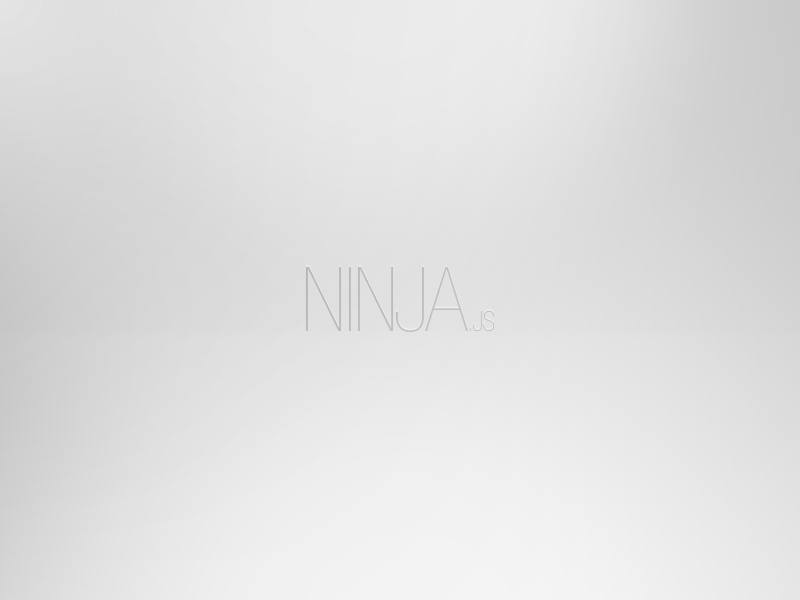
<style>
.page{position:relative;width:800px;height:600px}
.page>*{position:absolute;margin:0}
.t1{font:90px "HelveticaNeueLTStd-UltLtCn";letter-spacing:-0.02em;color:#bcbcbc}
.t2{font:27px "HelveticaNeueLTStd-UltLtCn";letter-spacing:-0.02em;color:#bcbcbc}
.t3{font:90px "HelveticaNeueLTStd-UltLtCn";letter-spacing:-0.02em;color:#bdbdbd}
.t4{font:27px "HelveticaNeueLTStd-UltLtCn";letter-spacing:-0.02em;color:#bdbdbd}
.t5{font:90px "HelveticaNeueLTStd-UltLtCn";letter-spacing:-0.02em;color:#d1c6c6}
.t6{font:27px "HelveticaNeueLTStd-UltLtCn";letter-spacing:-0.02em;color:#d1c6c6}
</style>
<div class="page">
<p class="t1" style="left:306px;top:266px;width:189px;height:65px">NINJA<span class="t2">.JS</span></p>
<p class="t3" style="left:306px;top:265px;width:189px;height:65px">NINJA<span class="t4">.JS</span></p>
<p class="t5" style="left:306px;top:267px;width:189px;height:65px">NINJA<span class="t6">.JS</span></p>
</div>
